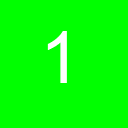
<style>
.page{position:relative;width:128px;height:128px;background:#00ff00}
.page>*{position:absolute;margin:0}
.t1{font:72px "ArialMT";color:#ffffff}
</style>
<div class="page">
<p class="t1" style="left:47px;top:31px;width:20px;height:52px">1</p>
</div>
